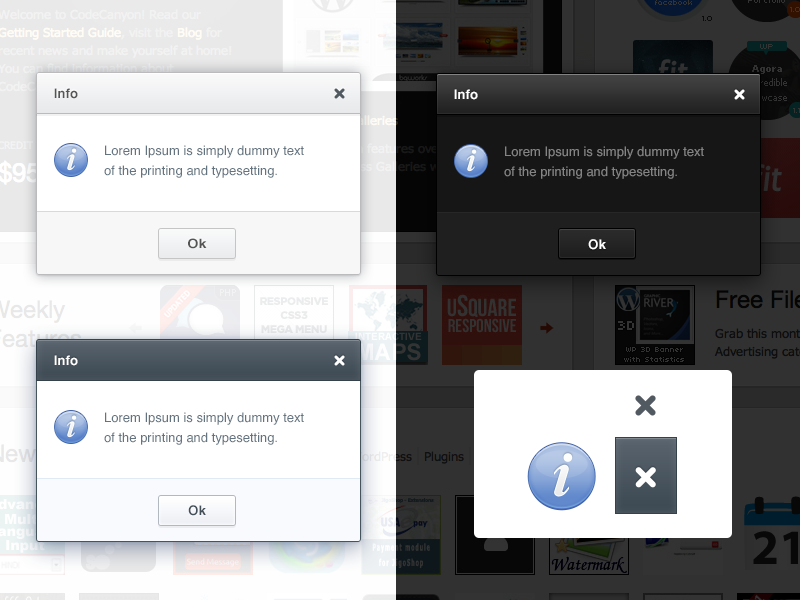
<style>
.page{position:relative;width:800px;height:600px;background:#ffffff}
.page>*{position:absolute;margin:0}
.t1{font:13px "Helvetica-Bold";color:#545454}
.t2{font:13px "Helvetica-Bold";color:#ffffff}
.t3{font:13px/20px "Helvetica";color:#63737f}
.t4{font:13px/20px "Helvetica";color:#848484}
.t5{font:13px "Helvetica-Bold";color:#545454;scale:1.09 1}
.t6{font:13px "Helvetica-Bold";color:#424e58}
</style>
<div class="page">
<p class="t1" style="left:54px;top:88px;width:24px;height:11px">Info</p>
<p class="t2" style="left:454px;top:89px;width:24px;height:11px">Info</p>
<p class="t3" style="left:104px;top:145px;width:200px;height:33px">Lorem Ipsum is simply dummy text of the printing and typesetting.</p>
<p class="t4" style="left:504px;top:146px;width:200px;height:33px">Lorem Ipsum is simply dummy text of the printing and typesetting.</p>
<p class="t5" style="left:188px;top:238px;width:19px;height:11px">Ok</p>
<p class="t2" style="left:588px;top:239px;width:18px;height:11px">Ok</p>
<p class="t2" style="left:54px;top:355px;width:24px;height:11px">Info</p>
<p class="t3" style="left:104px;top:412px;width:200px;height:33px">Lorem Ipsum is simply dummy text of the printing and typesetting.</p>
<p class="t6" style="left:188px;top:505px;width:18px;height:11px">Ok</p>
</div>
